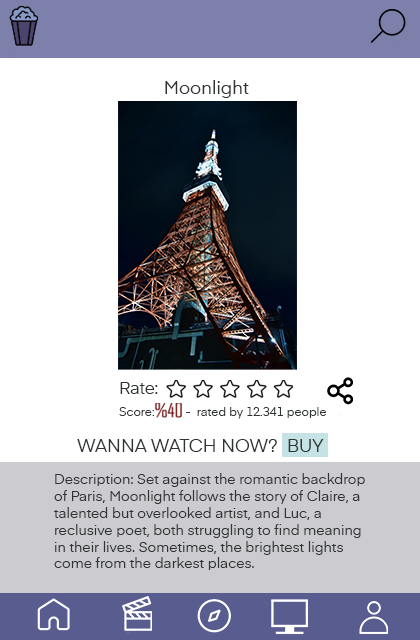
<style>
.page{position:relative;width:420px;height:640px;background:#ffffff}
.page>*{position:absolute;margin:0}
.t1{font:18px "Eina01-Regular";color:#303333}
.t2{font:16.5px "Eina01-Regular";color:#303333}
.t3{font:12px "Eina01-Regular";color:#303333}
.t4{font:14px "Eina01-Regular";color:#303333}
</style>
<div class="page">
<p class="t1" style="left:165px;top:80px;width:84px;height:18px">Moonlight</p>
<p class="t2" style="left:120px;top:382px;width:38px;height:12px">Rate:</p>
<p class="t3" style="left:119px;top:407px;width:208px;height:12px">Score:          -  rated by 12.341 people</p>
<p class="t1" style="left:77px;top:439px;width:247px;height:13px">WANNA WATCH NOW?  BUY</p>
<p class="t4" style="left:54px;top:473px;width:311px;height:97px">Description: Set against the romantic backdrop of Paris, Moonlight follows the story of Claire, a talented but overlooked artist, and Luc, a reclusive poet, both struggling to find meaning in their lives. Sometimes, the brightest lights come from the darkest places.</p>
</div>
